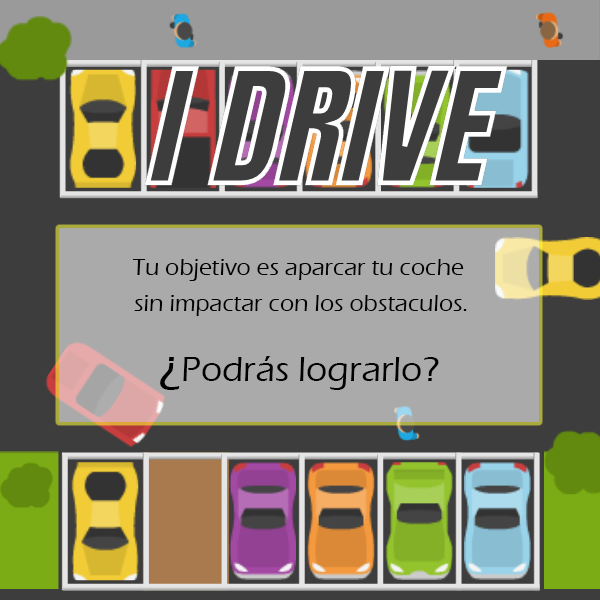
<style>
.page{position:relative;width:600px;height:600px;background:#3d3d3d}
.page>*{position:absolute;margin:0}
.t1{font:24px/36px "ErasITC-Medium";color:#000000}
.t2{font:36px "ErasITC-Medium";color:#000000}
.t3{font:48px "ErasITC-Medium";color:#000000}
</style>
<div class="page">
<p class="t1" style="left:132px;top:259px;width:335px;height:57px;text-align:center">Tu objetivo es aparcar tu coche <br>sin impactar con los obstaculos.</p>
<p class="t2" style="left:160px;top:356px;width:279px;height:34px"><span class="t3">¿</span>Podrás lograrlo?</p>
</div>
